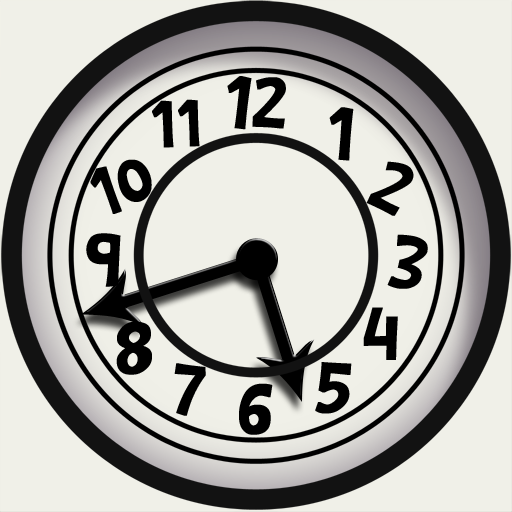
<style>
.page{position:relative;width:512px;height:512px;background:#f0f0e8}
.page>*{position:absolute;margin:0}
.t1{font:77.7px "BarthowheelRegular";letter-spacing:0.01em;color:#000000;text-transform:uppercase;font-weight:bold}
.t2{font:68.8px "BarthowheelRegular";letter-spacing:0.01em;color:#000000;text-transform:uppercase;font-weight:bold}
.t3{font:70.3px "BarthowheelRegular";letter-spacing:0.01em;color:#000000;text-transform:uppercase;font-weight:bold}
</style>
<div class="page">
<p class="t1" style="left:227px;top:76px;width:59px;height:54px;rotate:6deg">12</p>
<p class="t2" style="left:152px;top:99px;width:48px;height:49px;rotate:-3deg">11</p>
<p class="t1" style="left:329px;top:107px;width:25px;height:54px;rotate:4deg">1</p>
<p class="t3" style="left:90px;top:159px;width:62px;height:55px;rotate:-20deg">10</p>
<p class="t1" style="left:366px;top:161px;width:48px;height:55px;rotate:29deg">2</p>
<p class="t1" style="left:86px;top:233px;width:35px;height:54px">9</p>
<p class="t1" style="left:387px;top:234px;width:41px;height:55px;rotate:11deg">3</p>
<p class="t1" style="left:363px;top:307px;width:35px;height:53px;rotate:2deg">4</p>
<p class="t1" style="left:116px;top:321px;width:36px;height:54px;rotate:-2deg">8</p>
<p class="t1" style="left:174px;top:363px;width:32px;height:53px;rotate:6deg">7</p>
<p class="t1" style="left:315px;top:362px;width:37px;height:52px;rotate:4deg">5</p>
<p class="t1" style="left:239px;top:383px;width:34px;height:52px;rotate:3deg">6</p>
</div>
